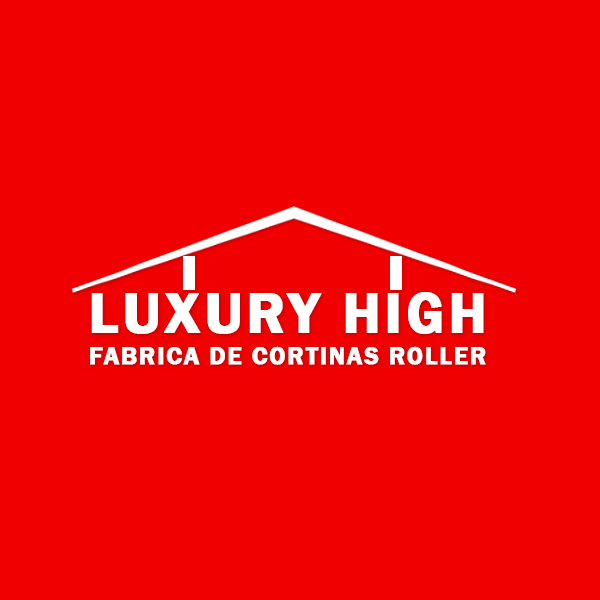
<style>
.page{position:relative;width:600px;height:600px;background:#f00000}
.page>*{position:absolute;margin:0}
.t1{font:58.3px "FranklinGothic-Demi";letter-spacing:0.05em;color:#ffffff;font-weight:bold}
.t2{font:25px "FranklinGothic-Demi";letter-spacing:0.05em;color:#ffffff;font-weight:bold}
</style>
<div class="page">
<p class="t1" style="left:91px;top:292px;width:393px;height:42px">LUXURY HIGH</p>
<p class="t2" style="left:90px;top:346px;width:396px;height:19px">FABRICA DE CORTINAS ROLLER</p>
</div>
